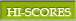
<style>
.page{position:relative;width:76px;height:21px;background:#8daf07}
.page>*{position:absolute;margin:0}
.t1{font:12px "BookAntiqua";color:#ffffff}
</style>
<div class="page">
<p class="t1" style="left:7px;top:8px;width:64px;height:8px">HI-SCORES</p>
</div>
